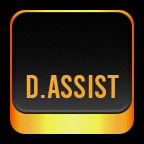
<style>
.page{position:relative;width:144px;height:144px;background:#000000}
.page>*{position:absolute;margin:0}
.t1{font:32px "Bebas-Regular";color:#efaa35}
</style>
<div class="page">
<p class="t1" style="left:26px;top:75px;width:93px;height:23px">D.ASSIST</p>
</div>
